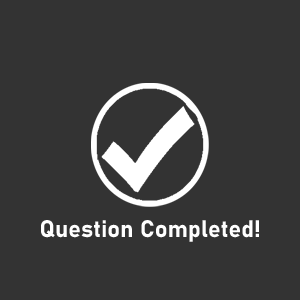
<style>
.page{position:relative;width:300px;height:300px;background:#333333}
.page>*{position:absolute;margin:0}
.t1{font:23.6px "Bahnschrift-Bold";letter-spacing:0.005em;color:#ffffff}
</style>
<div class="page">
<p class="t1" style="left:41px;top:220px;width:218px;height:22px">Question Completed!</p>
</div>
